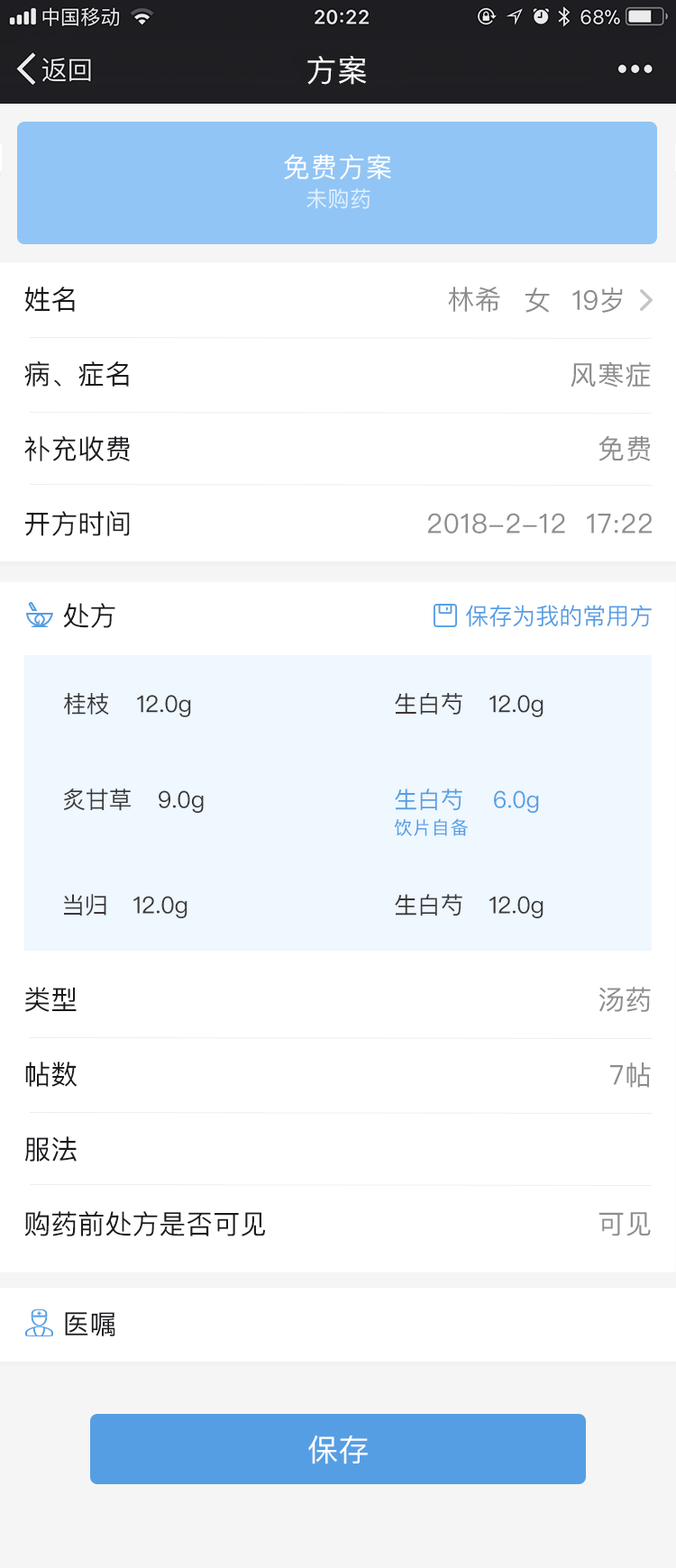
<style>
.page{position:relative;width:676px;height:1568px;background:#ffffff}
.page>*{position:absolute;margin:0}
.t1{font:30.6px "PingFangSC-Regular";letter-spacing:0.02em;color:#ffffff}
.t2{font:27px "PingFangSC-Regular";letter-spacing:0.02em;color:#ffffff}
.t3{font:21.6px "PingFangSC-Regular";letter-spacing:0.02em;color:#dff0ff}
.t4{font:27px "PingFangSC-Regular";color:#1b1b1f}
.t5{font:27px "PingFangSC-Regular";color:#8d8d8d}
.t6{font:27px "PingFangSC-Regular";letter-spacing:0.02em;color:#8d8d8d}
.t7{font:23.4px "PingFangSC-Regular";color:#569ee3}
.t8{font:23.4px "PingFangSC-Regular";letter-spacing:-0.02em;color:#393838}
.t9{font:23.4px "PingFangSC-Regular";letter-spacing:-0.02em;color:#569ee3}
.t10{font:18px "PingFangSC-Light";color:#569ee3;font-weight:bold}
.t11{font:30.6px "PingFangSC-Regular";color:#ffffff}
</style>
<div class="page">
<p class="t1" style="left:307px;top:56px;width:59px;height:29px">方案</p>
<p class="t2" style="left:284px;top:154px;width:107px;height:26px">免费方案</p>
<p class="t3" style="left:306px;top:188px;width:64px;height:21px">未购药</p>
<p class="t4" style="left:24px;top:287px;width:51px;height:25px">姓名</p>
<p class="t5" style="left:448px;top:287px;width:52px;height:25px">林希</p>
<p class="t5" style="left:525px;top:287px;width:25px;height:26px">女</p>
<p class="t5" style="left:572px;top:287px;width:51px;height:26px">19岁</p>
<p class="t4" style="left:24px;top:361px;width:105px;height:26px">病、症名</p>
<p class="t6" style="left:570px;top:361px;width:81px;height:26px">风寒症</p>
<p class="t4" style="left:24px;top:436px;width:106px;height:25px">补充收费</p>
<p class="t6" style="left:598px;top:435px;width:53px;height:26px">免费</p>
<p class="t4" style="left:25px;top:511px;width:105px;height:25px">开方时间</p>
<p class="t6" style="left:427px;top:513px;width:225px;height:20px">2018-2-12  17:22</p>
<p class="t4" style="left:63px;top:603px;width:52px;height:25px">处方</p>
<p class="t7" style="left:466px;top:605px;width:186px;height:22px">保存为我的常用方</p>
<p class="t8" style="left:64px;top:693px;width:45px;height:22px">桂枝</p>
<p class="t8" style="left:137px;top:695px;width:54px;height:22px">12.0g</p>
<p class="t8" style="left:395px;top:693px;width:67px;height:22px">生白芍</p>
<p class="t8" style="left:489px;top:695px;width:54px;height:22px">12.0g</p>
<p class="t8" style="left:63px;top:789px;width:68px;height:22px">炙甘草</p>
<p class="t8" style="left:159px;top:790px;width:45px;height:23px">9.0g</p>
<p class="t9" style="left:395px;top:789px;width:67px;height:21px">生白芍</p>
<p class="t9" style="left:494px;top:790px;width:45px;height:23px">6.0g</p>
<p class="t10" style="left:394px;top:818px;width:74px;height:18px">饮片自备</p>
<p class="t8" style="left:64px;top:894px;width:42px;height:22px">当归</p>
<p class="t8" style="left:395px;top:894px;width:67px;height:22px">生白芍</p>
<p class="t8" style="left:133px;top:896px;width:54px;height:22px">12.0g</p>
<p class="t8" style="left:489px;top:896px;width:54px;height:22px">12.0g</p>
<p class="t4" style="left:25px;top:987px;width:52px;height:25px">类型</p>
<p class="t5" style="left:598px;top:987px;width:53px;height:25px">汤药</p>
<p class="t4" style="left:25px;top:1062px;width:52px;height:25px">帖数</p>
<p class="t6" style="left:610px;top:1062px;width:41px;height:26px">7帖</p>
<p class="t4" style="left:25px;top:1136px;width:52px;height:26px">服法</p>
<p class="t4" style="left:24px;top:1211px;width:241px;height:25px">购药前处方是否可见</p>
<p class="t6" style="left:598px;top:1212px;width:53px;height:24px">可见</p>
<p class="t4" style="left:65px;top:1312px;width:50px;height:24px">医嘱</p>
<p class="t11" style="left:308px;top:1435px;width:60px;height:29px">保存</p>
</div>
